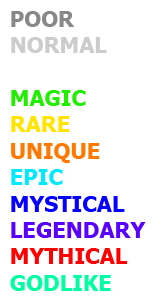
<style>
.page{position:relative;width:165px;height:300px;background:#ffffff}
.page>*{position:absolute;margin:0}
.t1{font:22px "Tahoma-Bold";color:#5a00ff;text-transform:uppercase}
.t2{font:22px "Tahoma-Bold";color:#888888;text-transform:uppercase}
.t3{font:22px "Tahoma-Bold";color:#cccccc;text-transform:uppercase}
.t4{font:22px "Tahoma-Bold";color:#ffffff;text-transform:uppercase}
.t5{font:22px "Tahoma-Bold";color:#22ef00;text-transform:uppercase}
.t6{font:22px "Tahoma-Bold";color:#ffe400;text-transform:uppercase}
.t7{font:22px "Tahoma-Bold";color:#ff7800;text-transform:uppercase}
.t8{font:22px "Tahoma-Bold";color:#00eaff;text-transform:uppercase}
.t9{font:22px "Tahoma-Bold";color:#0600ff;text-transform:uppercase}
.t10{font:22px "Tahoma-Bold";color:#ff0000;text-transform:uppercase}
.t11{font:22px "Tahoma-Bold";color:#00ffa2;text-transform:uppercase}
</style>
<div class="page">
<p class="t1" style="left:10px;top:11px;width:136px;height:280px"><span class="t2">Poor<br></span><span class="t3">Normal<br></span><span class="t4">Superior<br></span><span class="t5">Magic<br></span><span class="t6">Rare<br></span><span class="t7">Unique<br></span><span class="t8">EPIC<br></span><span class="t9">Mystical<br></span>Legendary<br><span class="t10">Mythical<br></span><span class="t11">GODLIKE</span></p>
</div>
